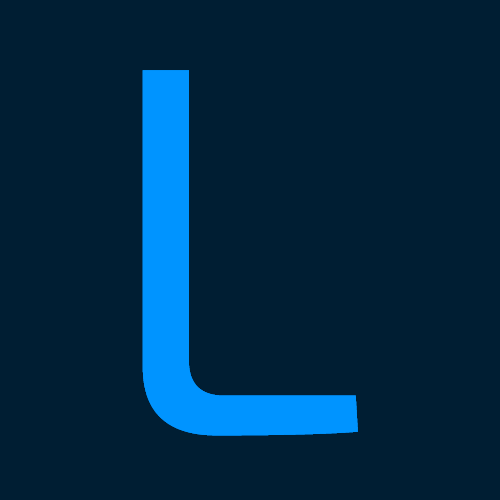
<style>
.page{position:relative;width:500px;height:500px;background:#001e33}
.page>*{position:absolute;margin:0}
.t1{font:528px "Exo2-Regular";color:#0094ff}
</style>
<div class="page">
<p class="t1" style="left:142px;top:70px;width:216px;height:366px">L</p>
<p class="t1" style="left:142px;top:70px;width:216px;height:366px">L</p>
</div>
